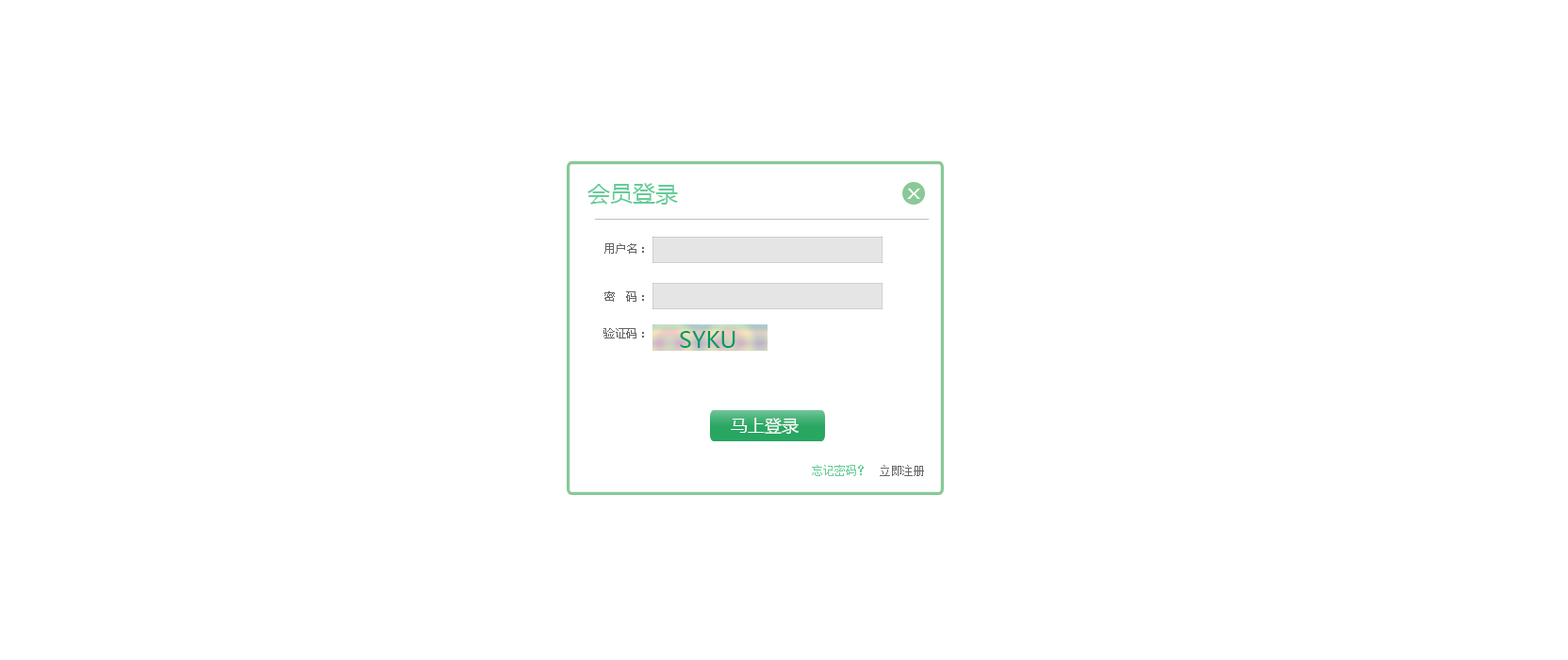
<style>
.page{position:relative;width:1568px;height:660px;background:#ffffff}
.page>*{position:absolute;margin:0}
.t1{font:22.6px "MicrosoftYaHei";color:#66cc99}
.t2{font:14.4px "MicrosoftYaHei";color:#ffffff;scale:1.42 1}
.t3{font:11.3px "MicrosoftYaHei";color:#666666}
.t4{font:22.6px "MicrosoftYaHei";color:#009966}
.t5{font:17px "MicrosoftYaHei";color:#ffffff}
.t6{font:11.3px "SimSun";color:#66cc99}
.t7{font:11.3px "SimSun";color:#666666}
</style>
<div class="page">
<p class="t1" style="left:587px;top:183px;width:91px;height:22px">会员登录</p>
<p class="t2" style="left:907px;top:189px;width:13px;height:10px">X</p>
<p class="t3" style="left:604px;top:243px;width:40px;height:11px">用户名：</p>
<p class="t3" style="left:604px;top:291px;width:40px;height:11px">密   码：</p>
<p class="t3" style="left:603px;top:328px;width:41px;height:10px">验证码：</p>
<p class="t4" style="left:680px;top:331px;width:55px;height:17px">SYKU</p>
<p class="t5" style="left:731px;top:418px;width:68px;height:17px">马上登录</p>
<p class="t6" style="left:812px;top:465px;width:52px;height:11px">忘记密码？</p>
<p class="t7" style="left:880px;top:465px;width:44px;height:11px">立即注册</p>
</div>
